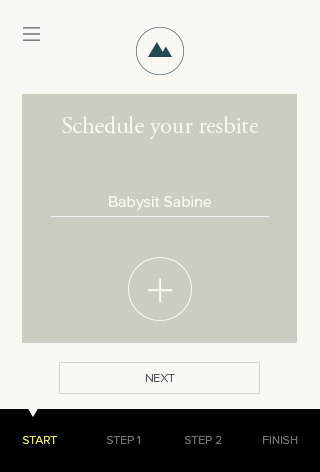
<style>
.page{position:relative;width:320px;height:472px;background:#cbccc2}
.page>*{position:absolute;margin:0}
.t1{font:24px "AGaramondPro-Regular";color:#f8f7f1}
.t2{font:16px "ProximaNova-Regular";color:#f8f7f1}
.t3{font:12px "ProximaNova-Light";color:#585657}
.t4{font:12px "ProximaNova-Light";color:#f4e664}
.t5{font:12px "ProximaNova-Light";color:#747372}
</style>
<div class="page">
<p class="t1" style="left:62px;top:116px;width:196px;height:23px">Schedule your resbite</p>
<p class="t2" style="left:109px;top:196px;width:102px;height:14px">Babysit Sabine</p>
<p class="t3" style="left:145px;top:374px;width:30px;height:8px">NEXT</p>
<p class="t4" style="left:23px;top:436px;width:34px;height:8px">START</p>
<p class="t5" style="left:107px;top:436px;width:33px;height:8px">STEP 1</p>
<p class="t5" style="left:185px;top:436px;width:37px;height:8px">STEP 2</p>
<p class="t5" style="left:263px;top:436px;width:35px;height:8px">FINISH</p>
</div>
